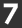
<style>
.page{position:relative;width:22px;height:28px;background:#333333}
.page>*{position:absolute;margin:0}
.t1{font:30px "ProductSans-Bold";color:#ffffff}
</style>
<div class="page">
<p class="t1" style="left:3px;top:3px;width:15px;height:22px">7</p>
</div>
